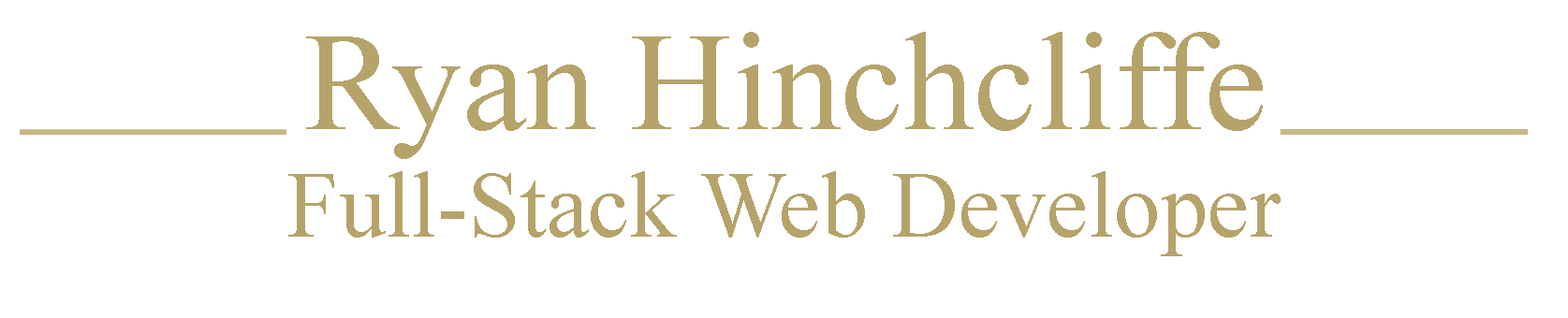
<style>
.page{position:relative;width:1568px;height:318px;background:#ffffff}
.page>*{position:absolute;margin:0}
.t1{font:140.4px "TimesNewRomanPSMT";color:#b5a36a}
.t2{font:93.6px "TimesNewRomanPSMT";color:#b5a36a}
</style>
<div class="page">
<p class="t1" style="left:306px;top:32px;width:957px;height:127px">Ryan Hinchcliffe</p>
<p class="t2" style="left:288px;top:171px;width:993px;height:85px">Full-Stack Web Developer</p>
</div>
